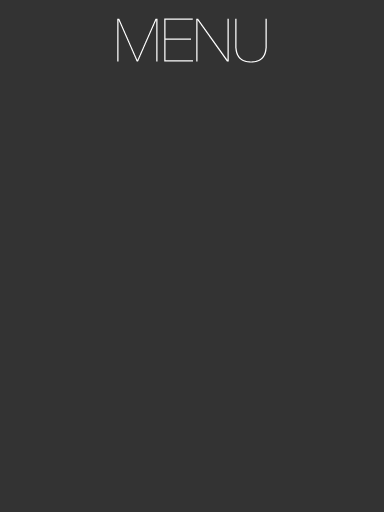
<style>
.page{position:relative;width:384px;height:512px;background:#333333}
.page>*{position:absolute;margin:0}
.t1{font:60px "HelveticaNeue-UltraLight";color:#ffffff}
</style>
<div class="page">
<p class="t1" style="left:117px;top:18px;width:150px;height:45px">MENU</p>
</div>
